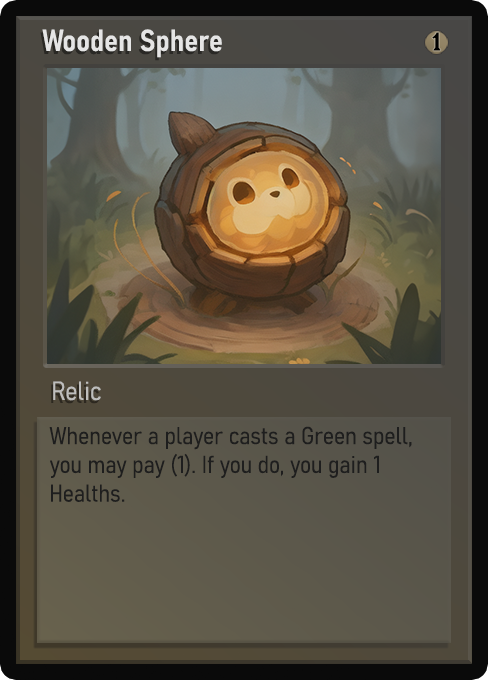
<style>
.page{position:relative;width:488px;height:680px}
.page>*{position:absolute;margin:0}
.t1{font:30px "Bahnschrift-SemiBoldSemiCondensed";color:#f2f2f2;font-weight:bold}
.t2{font:25px "WTRRoycroft";color:#000000;font-weight:bold;scale:1.09 1}
.t3{font:26px "Bahnschrift-LightSemiCondensed";color:#c8c8c8;font-weight:bold}
.t4{font:24px "Bahnschrift-LightSemiCondensed";color:#1e1e1e;font-weight:bold}
</style>
<div class="page">
<p class="t1" style="left:42px;top:29px;width:180px;height:29px;opacity:0.9">Wooden Sphere</p>
<p class="t2" style="left:432px;top:32px;width:9px;height:19px">1</p>
<p class="t3" style="left:53px;top:381px;width:48px;height:20px;opacity:0.9">Relic</p>
<p class="t4" style="left:49px;top:426px;width:363px;height:76px">Whenever a player casts a Green spell, you may pay (1). If you do, you gain 1 Healths.</p>
</div>
